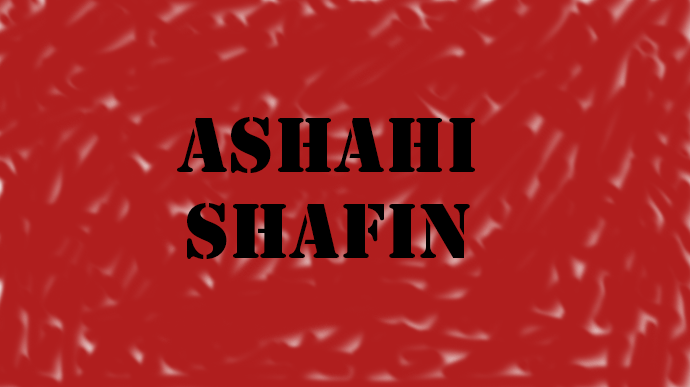
<style>
.page{position:relative;width:690px;height:387px;background:#b01e1e}
.page>*{position:absolute;margin:0}
.t1{font:72px "StencilStd";color:#000000}
</style>
<div class="page">
<p class="t1" style="left:177px;top:117px;width:298px;height:142px;text-align:center">Ashahi<br>Shafin</p>
</div>
